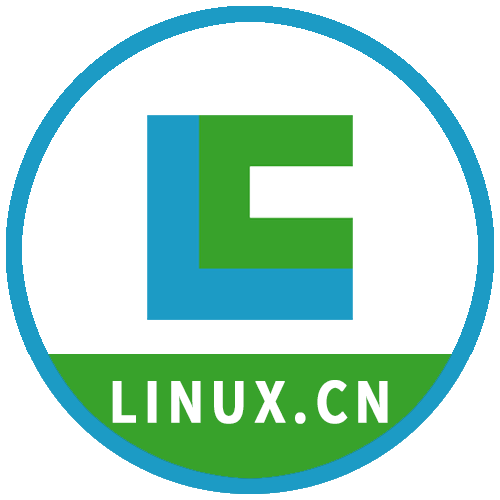
<style>
.page{position:relative;width:500px;height:500px;background:#ffffff}
.page>*{position:absolute;margin:0}
.t1{font:55px "SourceHanSansCN-Bold";letter-spacing:0.12em;color:#ffffff;font-weight:bold;scale:0.89 1}
</style>
<div class="page">
<p class="t1" style="left:112px;top:380px;width:276px;height:44px">LINUX.CN</p>
</div>
